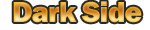
<style>
.page{position:relative;width:150px;height:30px;background:#ffffff}
.page>*{position:absolute;margin:0}
.t1{font:30px "FranklinGothic-Heavy";letter-spacing:-0.025em}
</style>
<div class="page">
<p class="t1" style="left:13px;top:1px;width:129px;height:22px">Dark Side</p>
</div>
